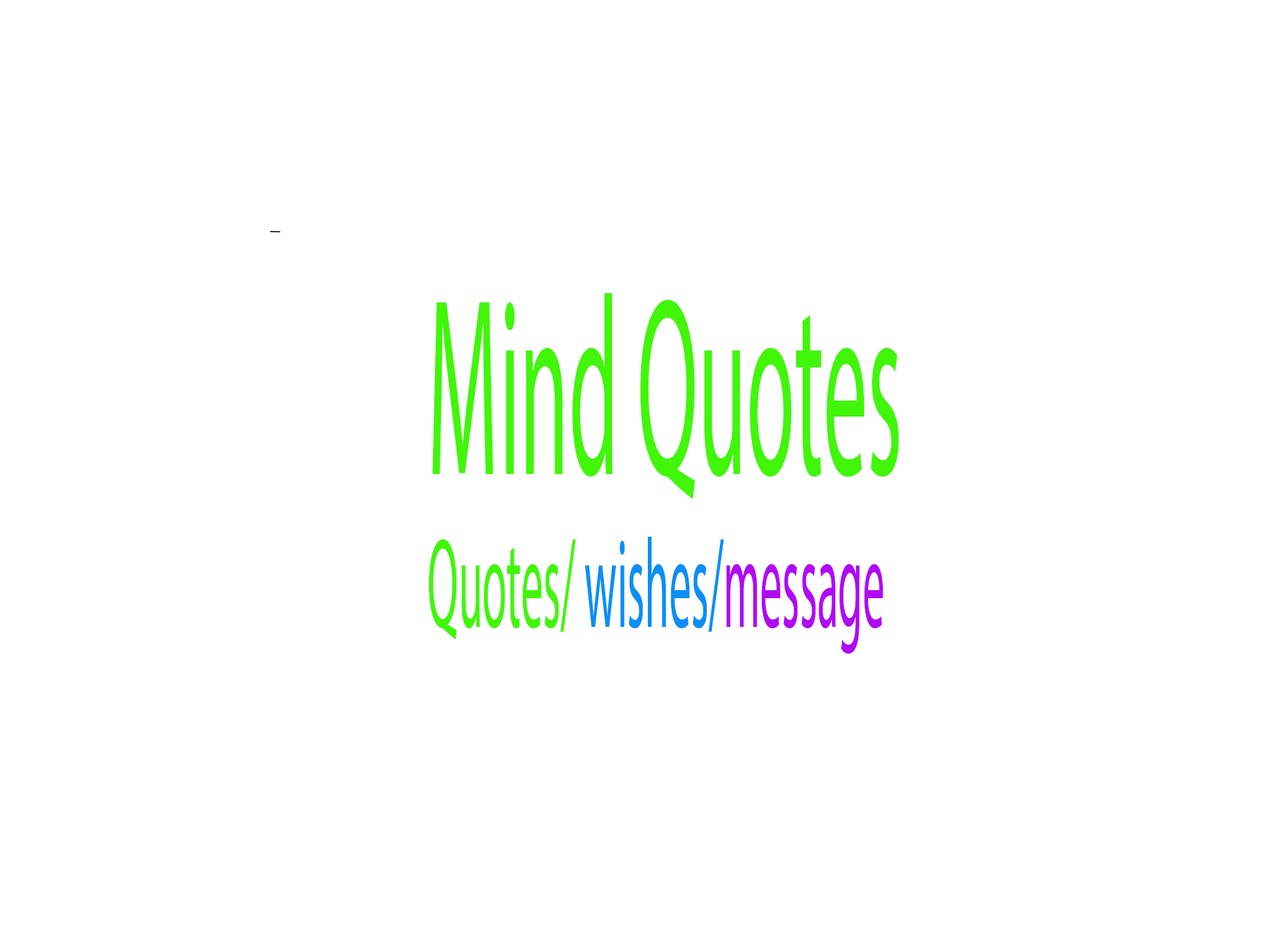
<style>
.page{position:relative;width:1261px;height:946px;background:#ffffff}
.page>*{position:absolute;margin:0}
.t1{font:254.6px "MyriadPro-Regular";color:#41f609;scale:0.35 1}
.t2{font:127.3px "MyriadPro-Regular";color:#41f609;scale:0.35 1}
.t3{font:127.3px "MyriadPro-Regular";color:#098ff6;scale:0.35 1}
.t4{font:127.3px "MyriadPro-Regular";color:#b009f6;scale:0.35 1}
</style>
<div class="page">
<p class="t1" style="left:429px;top:293px;width:470px;height:361px">Mind Quotes<br><span class="t2">Quotes/</span><span class="t3"> wishes/</span><span class="t4">message</span></p>
</div>
